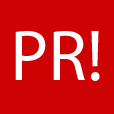
<style>
.page{position:relative;width:114px;height:114px;background:#cd0202}
.page>*{position:absolute;margin:0}
.t1{font:72px "MyriadPro-Regular";color:#fffefe}
</style>
<div class="page">
<p class="t1" style="left:15px;top:31px;width:85px;height:50px">PR!</p>
</div>
